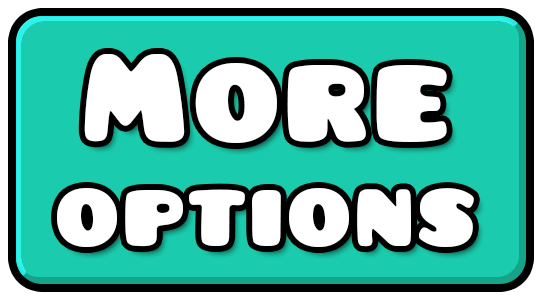
<style>
.page{position:relative;width:544px;height:300px;background:#1accad}
.page>*{position:absolute;margin:0}
.t1{font:100px/104.9px "Pusab";letter-spacing:0.04em;color:#ffffff}
.t2{font:135px/94px "Pusab";letter-spacing:0.04em;color:#ffffff}
</style>
<div class="page">
<p class="t1" style="left:57px;top:54px;width:417px;height:193px;text-align:center"><span class="t2">More<br></span>options</p>
</div>
